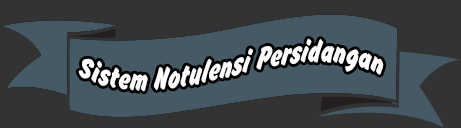
<style>
.page{position:relative;width:461px;height:128px;background:#333333}
.page>*{position:absolute;margin:0}
.t1{font:33px "BrushHandNew";color:#ffffff;scale:0.84 1}
</style>
<div class="page">
<p class="t1" style="left:78px;top:38px;width:306px;height:54px">Sistem Notulensi Persidangan</p>
</div>
